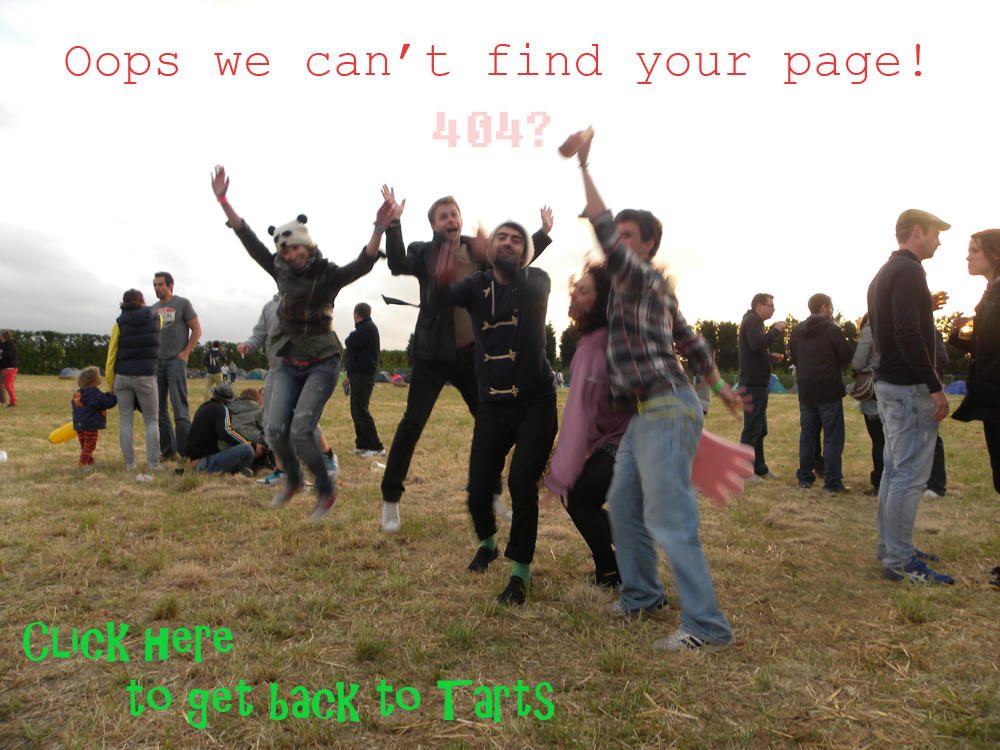
<style>
.page{position:relative;width:1000px;height:750px;background:#ffffff}
.page>*{position:absolute;margin:0}
.t1{font:50px "CourierNewPSMT";color:#e73838}
.t2{font:50px "Fixedsys";color:#fad4d4}
.t3{font:50px "ARCHRISTY";color:#13d33c}
</style>
<div class="page">
<p class="t1" style="left:65px;top:43px;width:857px;height:41px">Oops we can’t find your page!</p>
<p class="t2" style="left:433px;top:111px;width:118px;height:36px">404?</p>
<p class="t3" style="left:23px;top:622px;width:532px;height:107px">Click here<br>       to get back to Tarts</p>
</div>
